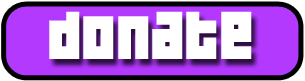
<style>
.page{position:relative;width:305px;height:81px;background:#ffffff}
.page>*{position:absolute;margin:0}
.t1{font:60px "04b19";color:#ffffff}
</style>
<div class="page">
<p class="t1" style="left:49px;top:11px;width:203px;height:48px">donate</p>
</div>
